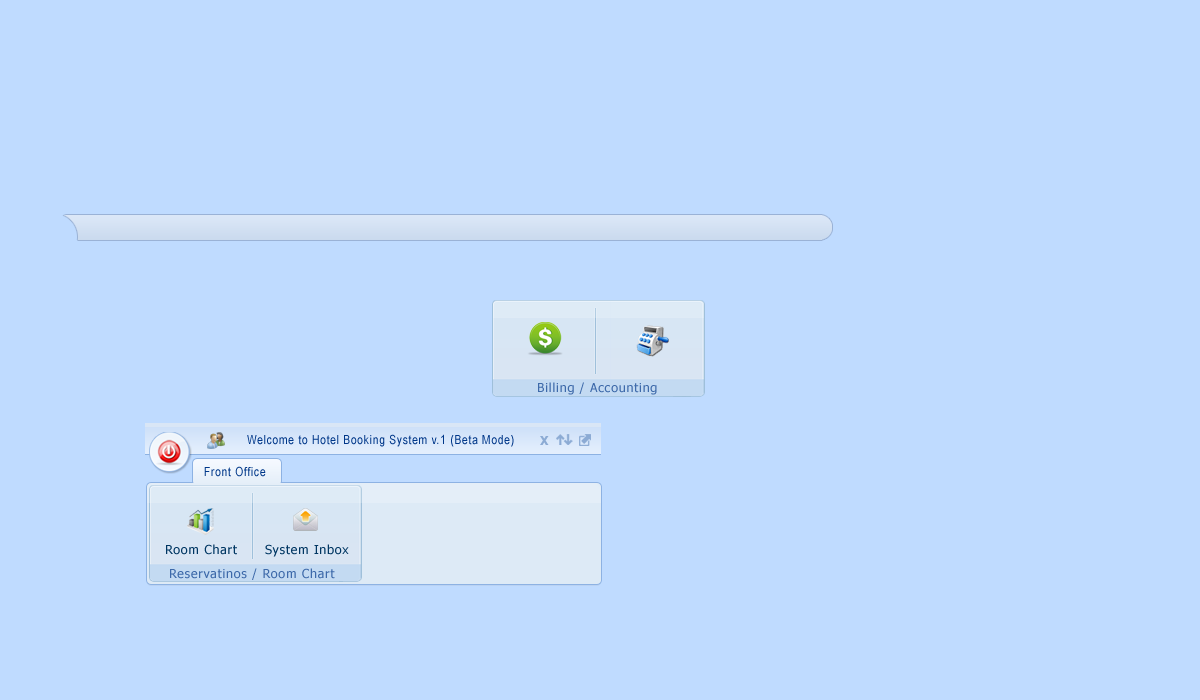
<style>
.page{position:relative;width:1200px;height:700px;background:#bfdbff}
.page>*{position:absolute;margin:0}
.t1{font:12.5px "Tahoma";letter-spacing:0.06em;color:#3e6aaa}
.t2{font:12.5px "ArialNarrow";letter-spacing:0.06em;color:#003789}
.t3{font:12.5px "Tahoma";letter-spacing:0.06em;color:#003662}
</style>
<div class="page">
<p class="t1" style="left:538px;top:382px;width:119px;height:13px">Billing / Accounting</p>
<p class="t2" style="left:247px;top:434px;width:267px;height:13px">Welcome to Hotel Booking System v.1 (Beta Mode)</p>
<p class="t2" style="left:204px;top:466px;width:62px;height:11px">Front Office</p>
<p class="t3" style="left:166px;top:544px;width:71px;height:11px">Room Chart</p>
<p class="t3" style="left:265px;top:544px;width:84px;height:13px">System Inbox</p>
<p class="t1" style="left:170px;top:568px;width:165px;height:12px">Reservatinos / Room Chart</p>
</div>
